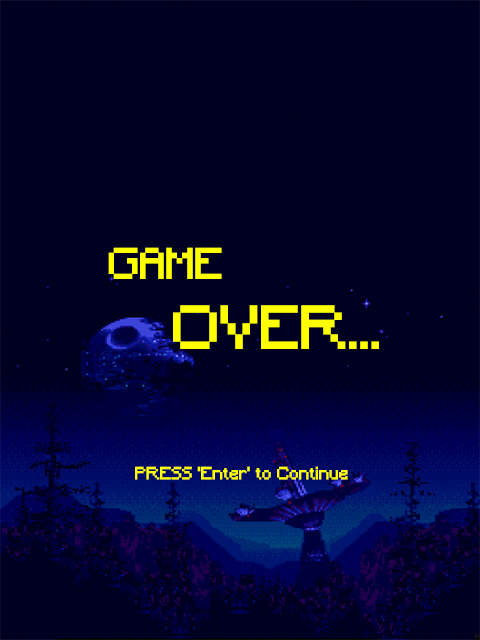
<style>
.page{position:relative;width:480px;height:640px;background:#000020}
.page>*{position:absolute;margin:0}
.t1{font:58.3px "Minecraft";letter-spacing:0.005em;color:#ffff00}
.t2{font:41.7px "Minecraft";letter-spacing:0.005em;color:#ffff00}
.t3{font:16.7px "Minecraft";letter-spacing:0.005em;color:#ffff00}
</style>
<div class="page">
<p class="t1" style="left:108px;top:247px;width:271px;height:102px;text-align:center"><span class="t2">GAME <br></span>OVER...</p>
<p class="t3" style="left:135px;top:466px;width:213px;height:14px">PRESS 'Enter' to Continue</p>
</div>
